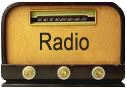
<style>
.page{position:relative;width:127px;height:88px}
.page>*{position:absolute;margin:0}
.t1{font:24px "ArialMT";letter-spacing:0.01em;color:#2e281a;scale:0.8 1}
</style>
<div class="page">
<p class="t1" style="left:40px;top:32px;width:49px;height:19px">Radio</p>
</div>
